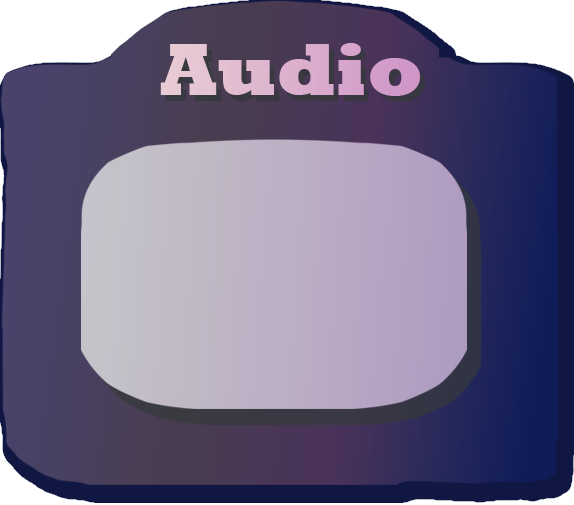
<style>
.page{position:relative;width:574px;height:505px}
.page>*{position:absolute;margin:0}
.t1{font:75px "Rockwell-ExtraBold"}
</style>
<div class="page">
<p class="t1" style="left:160px;top:43px;width:260px;height:53px">Audio</p>
</div>
